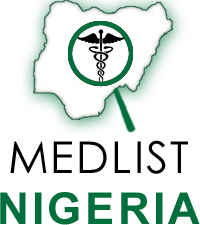
<style>
.page{position:relative;width:200px;height:225px;background:#ffffff}
.page>*{position:absolute;margin:0}
.t1{font:44px "CenturyGothic";letter-spacing:0.05em;color:#000000}
.t2{font:44px "Arial-BoldMT";letter-spacing:0.075em;color:#006f3c}
</style>
<div class="page">
<p class="t1" style="left:10px;top:140px;width:178px;height:34px">MEDLIST</p>
<p class="t2" style="left:0px;top:192px;width:200px;height:33px">NIGERIA</p>
</div>
